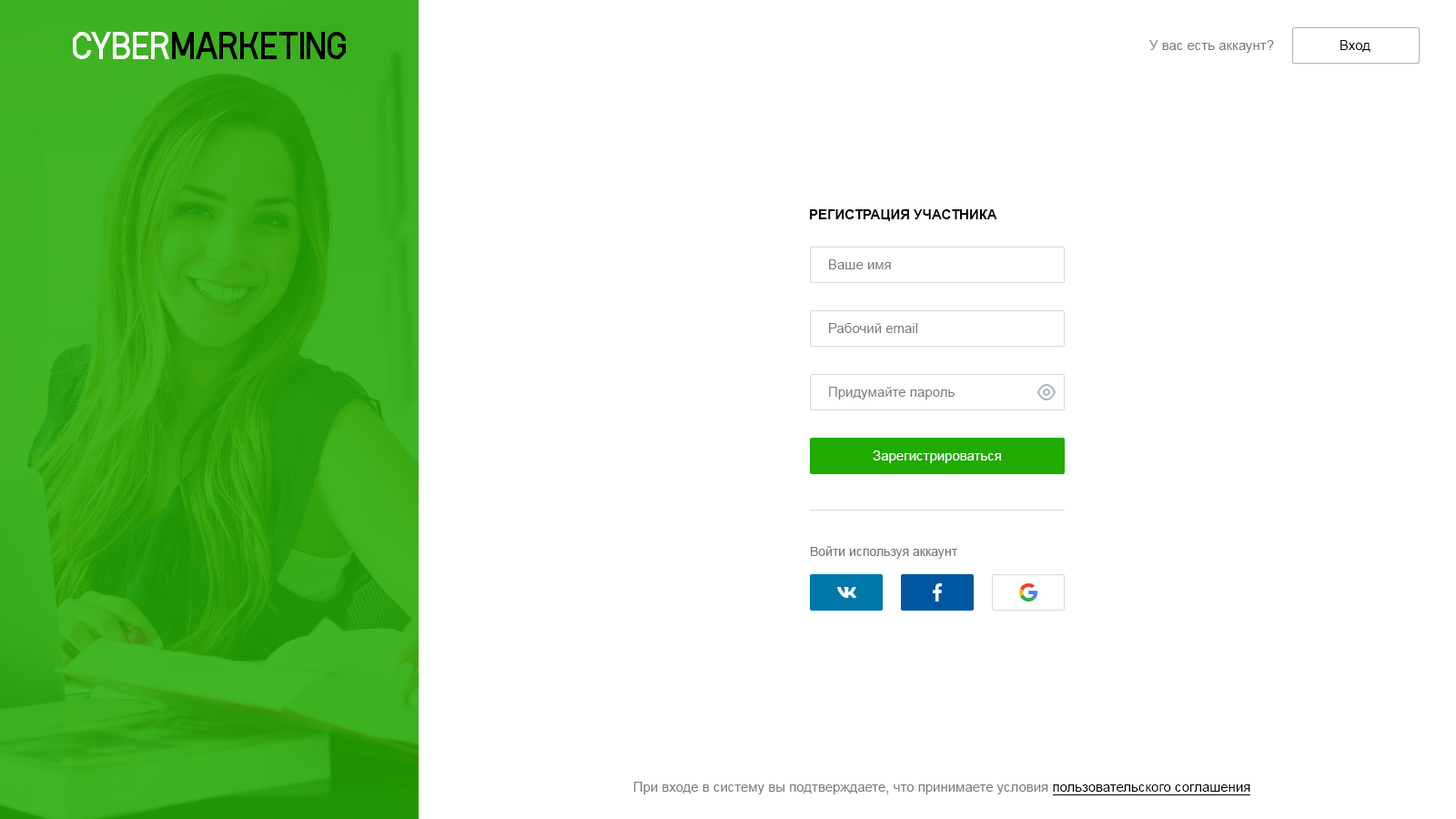
<style>
.page{position:relative;width:1456px;height:819px;background:#ffffff}
.page>*{position:absolute;margin:0}
.t1{font:13.6px "ArialMT";color:#787b81}
.t2{font:13.6px "ArialMT";color:#000000}
.t3{font:13.6px "Arial-BoldMT";color:#000000;text-transform:uppercase}
.t4{font:13.6px "ArialMT";color:#ffffff}
.t5{font:12.7px "ArialMT";color:#787b81}
</style>
<div class="page">
<p class="t1" style="left:1149px;top:40px;width:125px;height:13px">У вас есть аккаунт?</p>
<p class="t2" style="left:1340px;top:40px;width:30px;height:12px">Вход</p>
<p class="t3" style="left:809px;top:209px;width:188px;height:12px">Регистрация участника</p>
<p class="t1" style="left:829px;top:259px;width:62px;height:10px">Ваше имя</p>
<p class="t1" style="left:829px;top:323px;width:89px;height:10px">Рабочий email</p>
<p class="t1" style="left:829px;top:387px;width:126px;height:12px">Придумайте пароль</p>
<p class="t4" style="left:873px;top:450px;width:128px;height:13px">Зарегистрироваться</p>
<p class="t5" style="left:811px;top:546px;width:146px;height:13px">Войти используя аккаунт</p>
<p class="t1" style="left:633px;top:782px;width:617px;height:12px">При входе в систему вы подтверждаете, что принимаете условия <span class="t2">пользовательского соглашения</span></p>
</div>
